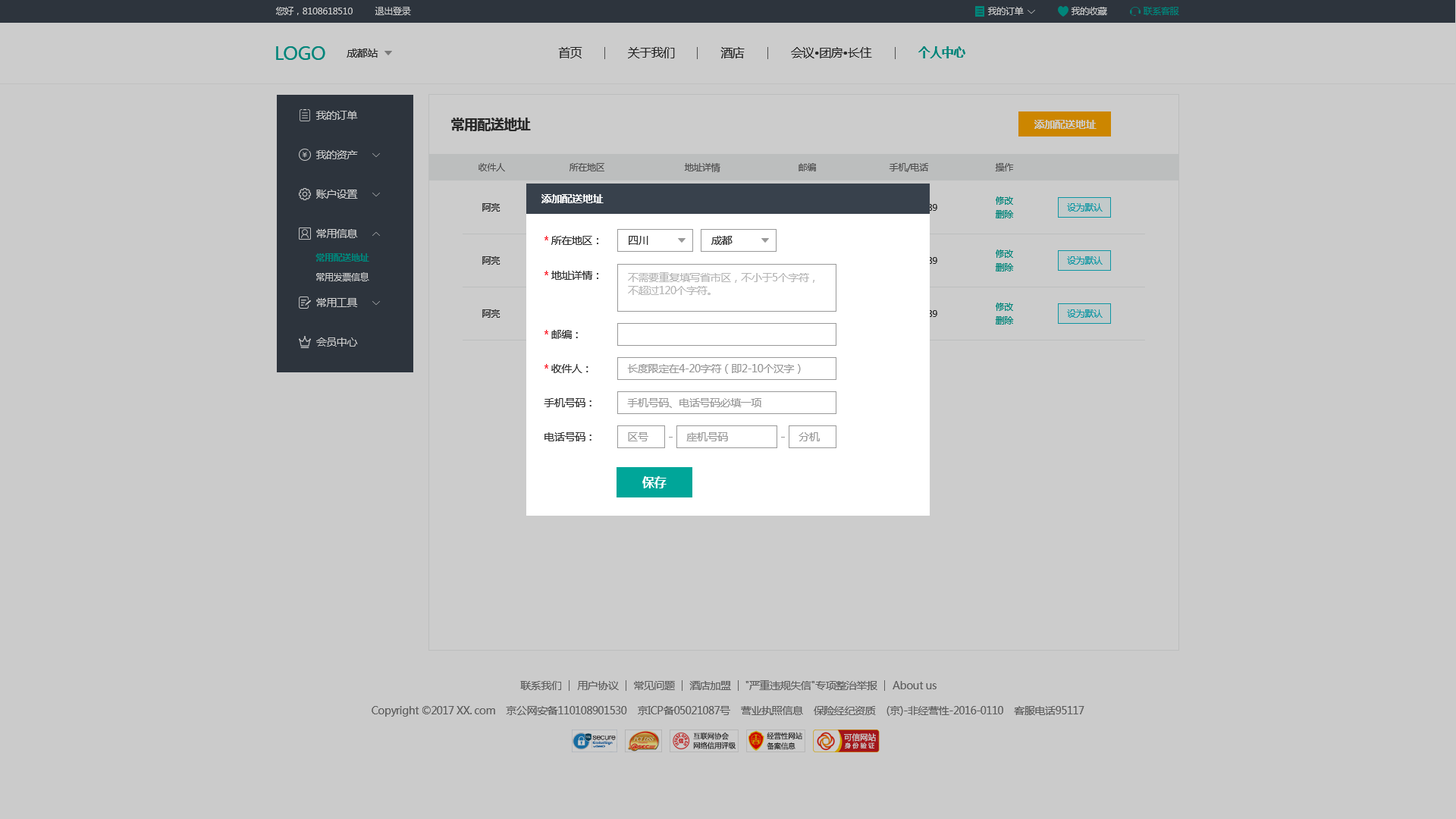
<style>
.page{position:relative;width:1456px;height:819px;background:#cbcbcb}
.page>*{position:absolute;margin:0}
.t1{font:9.1px "MicrosoftYaHei";letter-spacing:-0.03em;color:#cccccc}
.t2{font:9.1px "MicrosoftYaHei";letter-spacing:-0.03em;color:#00857a}
.t3{font:18.2px "MicrosoftYaHei";letter-spacing:-0.03em;color:#00857a}
.t4{font:10.6px "MicrosoftYaHei";letter-spacing:-0.03em;color:#333333}
.t5{font:12.1px "MicrosoftYaHei";letter-spacing:-0.03em;color:#333333}
.t6{font:12.1px "MicrosoftYaHei-Bold";letter-spacing:-0.03em;color:#00857a}
.t7{font:10.6px "MicrosoftYaHei";letter-spacing:-0.03em;color:#cccccc}
.t8{font:13.6px "MicrosoftYaHei-Bold";letter-spacing:-0.03em;color:#333333}
.t9{font:10.6px "MicrosoftYaHei-Bold";letter-spacing:-0.03em;color:#cccccc}
.t10{font:9.1px "MicrosoftYaHei";letter-spacing:-0.03em;color:#666666}
.t11{font:10.6px "MicrosoftYaHei-Bold";letter-spacing:-0.03em;color:#ffffff}
.t12{font:9.1px "MicrosoftYaHei";letter-spacing:-0.03em;color:#333333}
.t13{font:9.1px "MicrosoftYaHei";letter-spacing:-0.03em;color:#0e96a3}
.t14{font:10.6px "MicrosoftYaHei";letter-spacing:-0.03em;color:#fb000d}
.t15{font:9.1px "MicrosoftYaHei-Bold";letter-spacing:-0.03em;color:#00857a}
.t16{font:10.6px "MicrosoftYaHei";letter-spacing:-0.03em;color:#b6b6b6}
.t17{font:10.6px "MicrosoftYaHei";letter-spacing:-0.03em;color:#999999}
.t18{font:12.1px "MicrosoftYaHei-Bold";letter-spacing:-0.03em;color:#ffffff}
.t19{font:10.6px "MicrosoftYaHei";letter-spacing:-0.03em;color:#777777}
</style>
<div class="page">
<p class="t1" style="left:276px;top:7px;width:77px;height:8px">您好，8108618510</p>
<p class="t1" style="left:375px;top:7px;width:36px;height:8px">退出登录</p>
<p class="t1" style="left:987px;top:7px;width:37px;height:8px">我的订单</p>
<p class="t1" style="left:1071px;top:7px;width:36px;height:8px">我的收藏</p>
<p class="t2" style="left:1144px;top:7px;width:35px;height:8px">联系客服</p>
<p class="t3" style="left:276px;top:46px;width:49px;height:14px">LOGO</p>
<p class="t4" style="left:347px;top:49px;width:31px;height:9px">成都站</p>
<p class="t5" style="left:558px;top:47px;width:24px;height:11px">首页</p>
<p class="t5" style="left:628px;top:47px;width:47px;height:11px">关于我们</p>
<p class="t5" style="left:720px;top:47px;width:25px;height:11px">酒店</p>
<p class="t5" style="left:791px;top:47px;width:81px;height:11px">会议•团房•长住</p>
<p class="t6" style="left:918px;top:46px;width:47px;height:12px">个人中心</p>
<p class="t7" style="left:315px;top:111px;width:43px;height:9px">我的订单</p>
<p class="t8" style="left:451px;top:118px;width:80px;height:13px">常用配送地址</p>
<p class="t9" style="left:1034px;top:120px;width:63px;height:9px">添加配送地址</p>
<p class="t7" style="left:315px;top:150px;width:43px;height:9px">我的资产</p>
<p class="t10" style="left:479px;top:163px;width:26px;height:8px">收件人</p>
<p class="t10" style="left:570px;top:163px;width:34px;height:8px">所在地区</p>
<p class="t10" style="left:684px;top:163px;width:36px;height:9px">地址详情</p>
<p class="t10" style="left:799px;top:163px;width:17px;height:8px">邮编</p>
<p class="t10" style="left:889px;top:163px;width:40px;height:9px">手机/电话</p>
<p class="t10" style="left:995px;top:163px;width:19px;height:8px">操作</p>
<p class="t7" style="left:316px;top:190px;width:42px;height:9px">账户设置</p>
<p class="t11" style="left:541px;top:194px;width:63px;height:9px">添加配送地址</p>
<p class="t2" style="left:996px;top:196px;width:17px;height:9px">修改</p>
<p class="t12" style="left:482px;top:203px;width:18px;height:9px">阿亮</p>
<p class="t13" style="left:1067px;top:203px;width:36px;height:9px">设为默认</p>
<p class="t2" style="left:995px;top:210px;width:19px;height:8px">删除</p>
<p class="t7" style="left:316px;top:229px;width:42px;height:9px">常用信息</p>
<p class="t4" style="left:544px;top:236px;width:54px;height:9px"><span class="t14">* </span>所在地区：</p>
<p class="t4" style="left:629px;top:236px;width:19px;height:9px">四川</p>
<p class="t4" style="left:711px;top:236px;width:22px;height:9px">成都</p>
<p class="t15" style="left:315px;top:253px;width:54px;height:9px">常用配送地址</p>
<p class="t12" style="left:482px;top:256px;width:18px;height:9px">阿亮</p>
<p class="t2" style="left:996px;top:249px;width:17px;height:9px">修改</p>
<p class="t13" style="left:1067px;top:256px;width:36px;height:9px">设为默认</p>
<p class="t2" style="left:995px;top:263px;width:19px;height:8px">删除</p>
<p class="t1" style="left:316px;top:272px;width:53px;height:9px">常用发票信息</p>
<p class="t4" style="left:544px;top:271px;width:54px;height:9px"><span class="t14">* </span>地址详情：</p>
<p class="t16" style="left:628px;top:272px;width:186px;height:23px">不需要重复填写省市区，不小于5个字符，<br>不超过120个字符。</p>
<p class="t7" style="left:316px;top:298px;width:42px;height:9px">常用工具</p>
<p class="t2" style="left:996px;top:303px;width:17px;height:8px">修改</p>
<p class="t12" style="left:482px;top:309px;width:18px;height:9px">阿亮</p>
<p class="t2" style="left:995px;top:316px;width:19px;height:9px">删除</p>
<p class="t13" style="left:1067px;top:309px;width:36px;height:9px">设为默认</p>
<p class="t4" style="left:544px;top:330px;width:34px;height:9px"><span class="t14">* </span>邮编：</p>
<p class="t7" style="left:316px;top:337px;width:42px;height:10px">会员中心</p>
<p class="t4" style="left:544px;top:364px;width:44px;height:9px"><span class="t14">* </span>收件人：</p>
<p class="t17" style="left:627px;top:364px;width:174px;height:10px">长度限定在4-20字符（即2-10个汉字）</p>
<p class="t4" style="left:544px;top:398px;width:47px;height:9px">手机号码：</p>
<p class="t17" style="left:627px;top:398px;width:134px;height:10px">手机号码、电话号码必填一项</p>
<p class="t4" style="left:544px;top:432px;width:47px;height:9px">电话号码：</p>
<p class="t17" style="left:628px;top:432px;width:20px;height:9px">区号</p>
<p class="t17" style="left:686px;top:432px;width:42px;height:9px">座机号码</p>
<p class="t17" style="left:799px;top:432px;width:21px;height:9px">分机</p>
<p class="t18" style="left:642px;top:476px;width:25px;height:12px">保存</p>
<p class="t19" style="left:520px;top:681px;width:41px;height:9px">联系我们</p>
<p class="t19" style="left:577px;top:681px;width:42px;height:9px">用户协议</p>
<p class="t19" style="left:634px;top:681px;width:41px;height:9px">常见问题</p>
<p class="t19" style="left:689px;top:681px;width:42px;height:9px">酒店加盟</p>
<p class="t19" style="left:745px;top:680px;width:132px;height:10px">"严重违规失信"专项整治举报</p>
<p class="t19" style="left:893px;top:681px;width:44px;height:8px">About us</p>
<p class="t19" style="left:372px;top:706px;width:712px;height:11px">Copyright ©2017 XX. com    京公网安备110108901530    京ICP备05021087号    营业执照信息    保险经纪资质    (京)-非经营性-2016-0110    客服电话95117</p>
</div>
